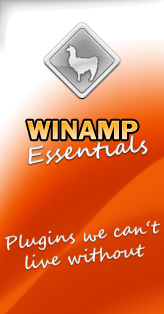
<style>
.page{position:relative;width:164px;height:314px}
.page>*{position:absolute;margin:0}
.t1{font:24px "Winamp";letter-spacing:-0.01em}
.t2{font:18px "SegoeScript-Bold";letter-spacing:-0.01em;color:#e9e9e9}
</style>
<div class="page">
<p class="t1" style="left:27px;top:120px;width:111px;height:20px">WINAMP</p>
<p class="t2" style="left:5px;top:220px;width:156px;height:50px;text-align:center;rotate:-6deg">Plugins we can‘t<br>live without</p>
</div>
